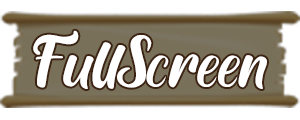
<style>
.page{position:relative;width:300px;height:120px;background:#ffffff}
.page>*{position:absolute;margin:0}
.t1{font:60px "CreamPeach-Regular";color:#ffffff}
</style>
<div class="page">
<p class="t1" style="left:33px;top:30px;width:234px;height:59px">FullScreen</p>
</div>
